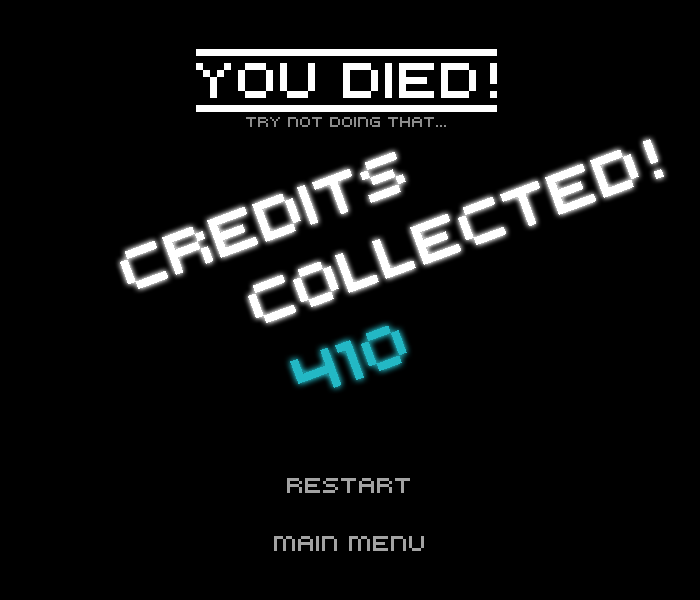
<style>
.page{position:relative;width:700px;height:600px;background:#000000}
.page>*{position:absolute;margin:0}
.t1{font:56px "Kroeger0553";color:#ffffff}
.t2{font:16px "Kroeger0553";color:#8d8d8d}
.t3{font:63.9px "Kroeger0553";color:#ffffff}
.t4{font:63.9px "Kroeger0553";color:#23b8c5}
.t5{font:24px "Kroeger0553";color:#a3a3a3}
</style>
<div class="page">
<p class="t1" style="left:196px;top:63px;width:301px;height:35px">YOU DIED!</p>
<p class="t2" style="left:246px;top:117px;width:200px;height:10px">TRY NOT DOING THAT...</p>
<p class="t3" style="left:120px;top:139px;width:544px;height:184px;rotate:-20deg">CREDITS <br>   COLLECTED!</p>
<p class="t4" style="left:290px;top:326px;width:117px;height:62px;rotate:-20deg">410</p>
<p class="t5" style="left:274px;top:478px;width:150px;height:73px;text-align:center">RESTART<br><br>MAIN MENU</p>
</div>
